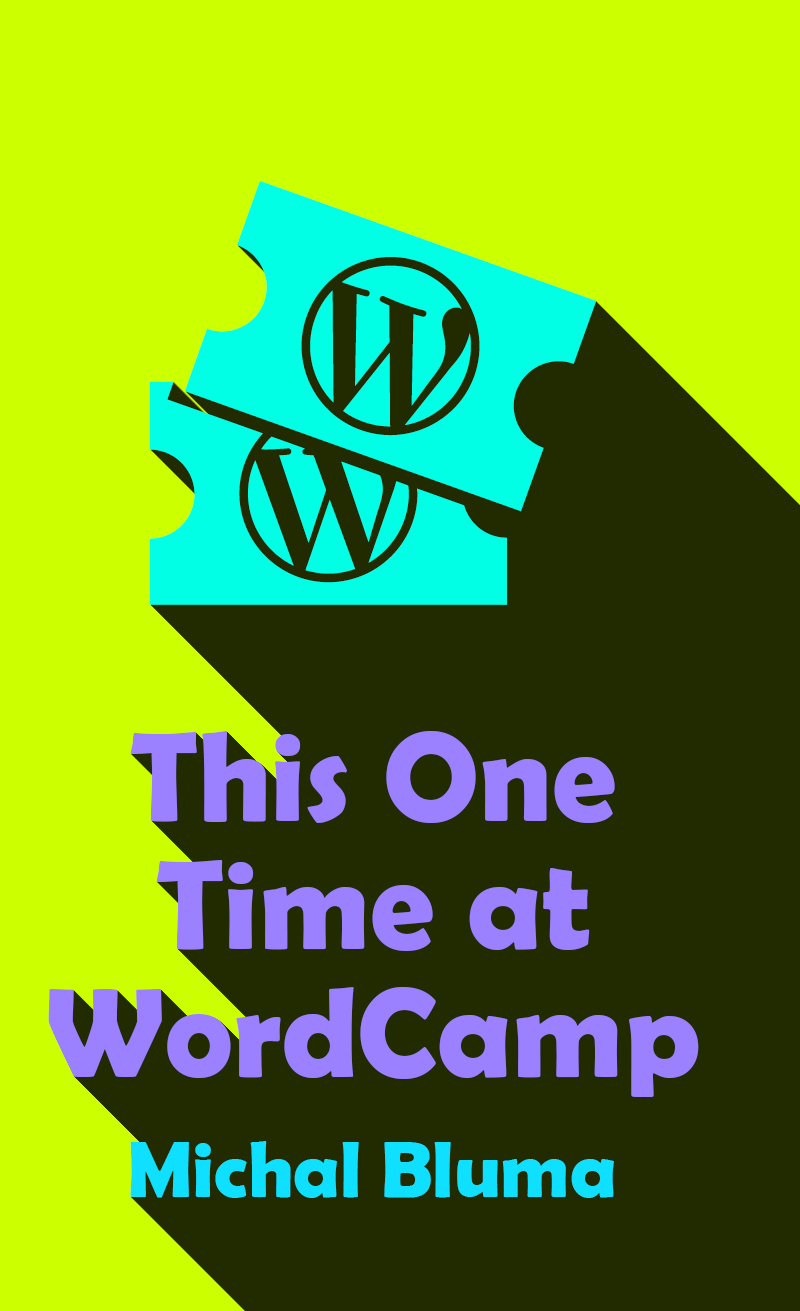
<style>
.page{position:relative;width:800px;height:1311px;background:#222b00}
.page>*{position:absolute;margin:0}
.t1{font:128px/128px "BerlinSansFBDemi-Bold";color:#9b80ff}
.t2{font:80px "BerlinSansFBDemi-Bold";color:#10e0ff}
</style>
<div class="page">
<p class="t1" style="left:48px;top:731px;width:651px;height:366px;text-align:center">This One Time at WordCamp</p>
<p class="t2" style="left:130px;top:1141px;width:484px;height:57px">Michal Bluma</p>
</div>
